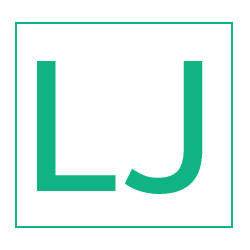
<style>
.page{position:relative;width:250px;height:250px;background:#ffffff}
.page>*{position:absolute;margin:0}
.t1{font:187.5px "Ubuntu";color:#10b484}
</style>
<div class="page">
<p class="t1" style="left:37px;top:61px;width:166px;height:133px">LJ</p>
</div>
